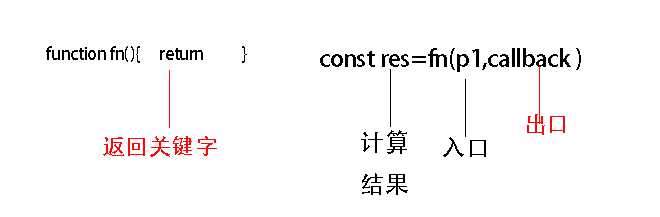
<style>
.page{position:relative;width:660px;height:217px;background:#ffffff}
.page>*{position:absolute;margin:0}
.t1{font:16.9px "AdobeHeitiStd-Regular";color:#000000}
.t2{font:23.6px "AdobeHeitiStd-Regular";color:#000000}
.t3{font:23.1px "AdobeHeitiStd-Regular";color:#fb0909}
.t4{font:24.1px "AdobeHeitiStd-Regular";color:#000000}
</style>
<div class="page">
<p class="t1" style="left:46px;top:46px;width:201px;height:17px">function fn(){     return          }</p>
<p class="t2" style="left:320px;top:48px;width:261px;height:24px">const res=fn(p1,callback )</p>
<p class="t3" style="left:527px;top:114px;width:38px;height:21px">出口</p>
<p class="t3" style="left:103px;top:136px;width:114px;height:21px">返回关键字</p>
<p class="t4" style="left:361px;top:130px;width:47px;height:65px">计算<br>结果</p>
<p class="t4" style="left:443px;top:137px;width:43px;height:20px">入口</p>
</div>
